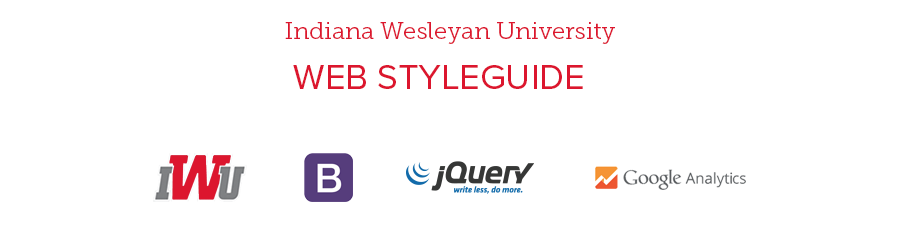
<style>
.page{position:relative;width:900px;height:225px;background:#ffffff}
.page>*{position:absolute;margin:0}
.t1{font:24px "MuseoSlab-300";color:#dc162e}
.t2{font:36px "ProximaNova-Regular";color:#dc162e}
</style>
<div class="page">
<p class="t1" style="left:285px;top:22px;width:330px;height:22px">Indiana Wesleyan University</p>
<p class="t2" style="left:293px;top:65px;width:290px;height:24px">WEB STYLEGUIDE</p>
</div>
